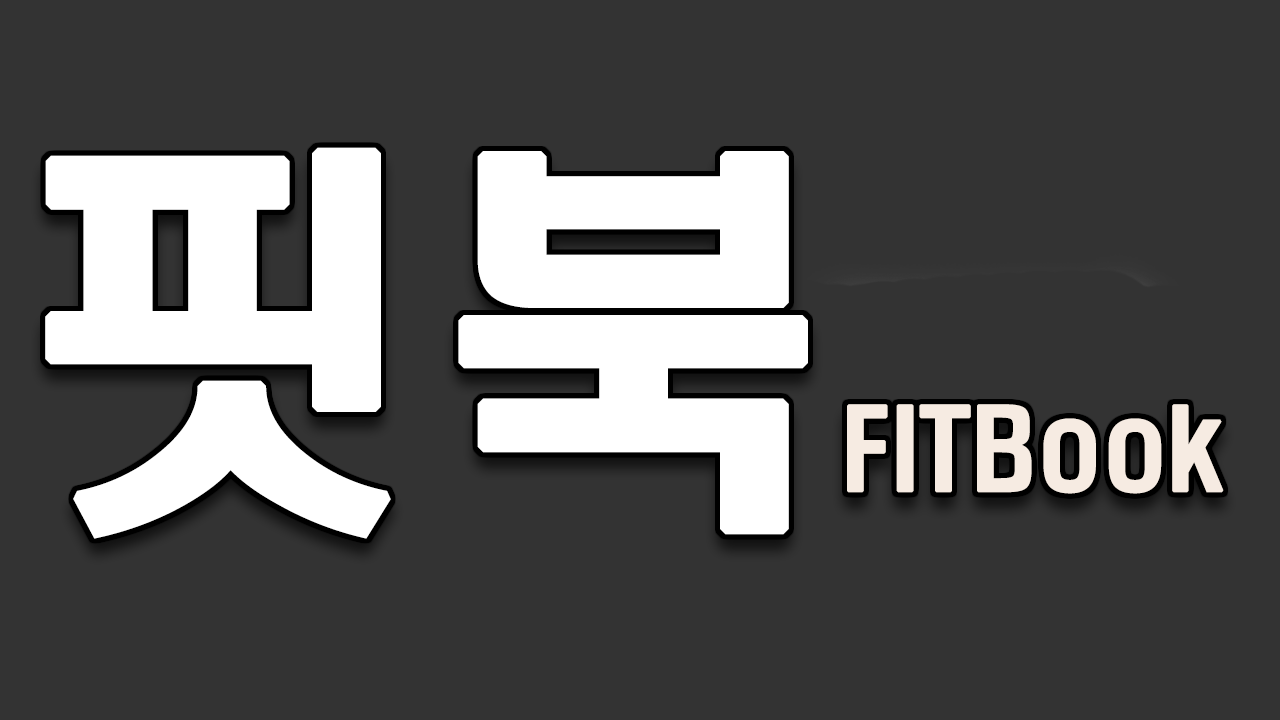
<style>
.page{position:relative;width:1280px;height:720px;background:#333333}
.page>*{position:absolute;margin:0}
.t1{font:100px "H2hdrM";color:#f6ebe2;font-weight:bold}
.t2{font:400px "H2hdrM";color:#ffffff;font-weight:bold}
</style>
<div class="page">
<p class="t1" style="left:45px;top:147px;width:1179px;height:392px"><span class="t2">핏북</span>FITBook</p>
</div>
